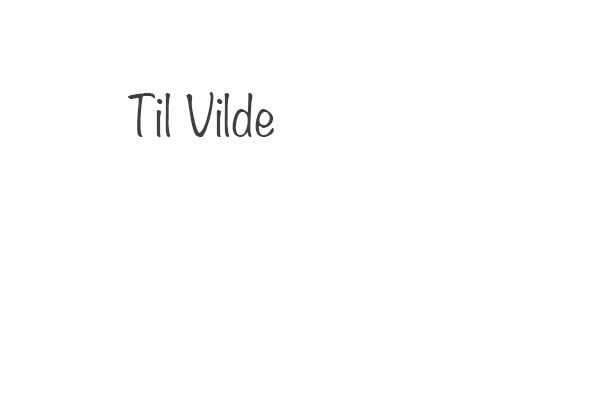
<style>
.page{position:relative;width:600px;height:400px;background:#ffffff}
.page>*{position:absolute;margin:0}
.t1{font:50px "Noteworthy-Light";color:#404040}
</style>
<div class="page">
<p class="t1" style="left:128px;top:92px;width:146px;height:45px">Til Vilde</p>
</div>
